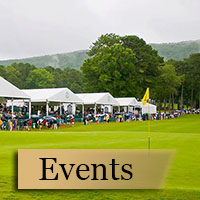
<style>
.page{position:relative;width:200px;height:200px}
.page>*{position:absolute;margin:0}
.t1{font:32px "Georgia";color:#000000}
</style>
<div class="page">
<p class="t1" style="left:39px;top:158px;width:94px;height:22px">Events</p>
</div>
